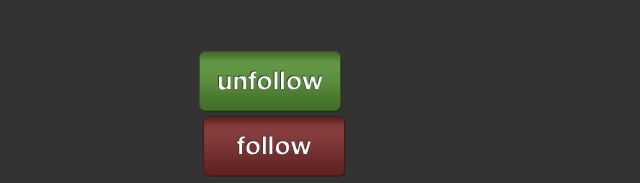
<style>
.page{position:relative;width:640px;height:183px;background:#333333}
.page>*{position:absolute;margin:0}
.t1{font:26px "HelveticaNeue-Bold";color:#ffffff}
</style>
<div class="page">
<p class="t1" style="left:218px;top:70px;width:105px;height:20px">unfollow</p>
<p class="t1" style="left:236px;top:135px;width:75px;height:20px">follow</p>
</div>
